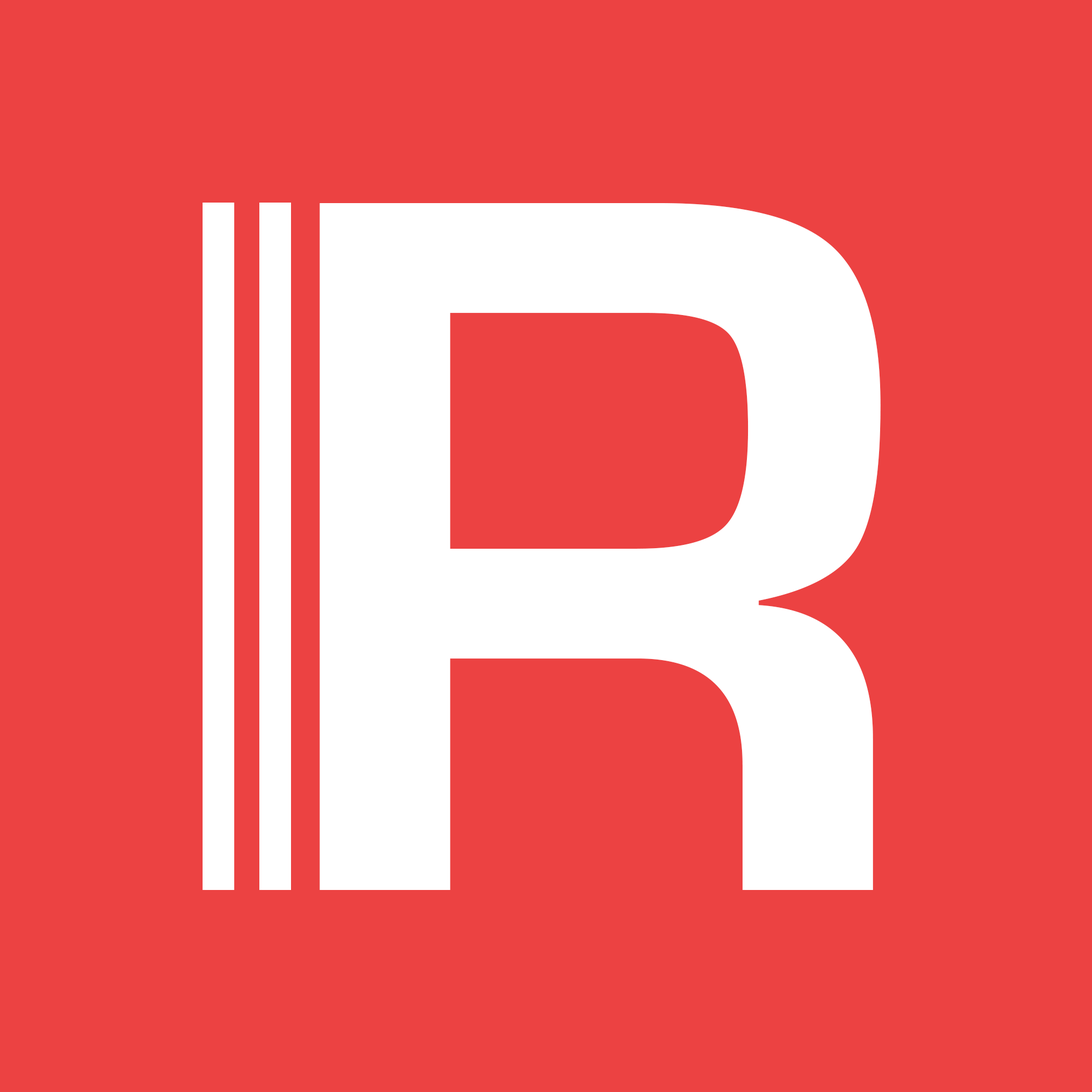
<style>
.page{position:relative;width:1092px;height:1092px;background:#ec4242}
.page>*{position:absolute;margin:0}
.t1{font:1030.9px "EurostileBold";color:#ffffff}
</style>
<div class="page">
<p class="t1" style="left:319px;top:203px;width:562px;height:687px">R</p>
</div>
